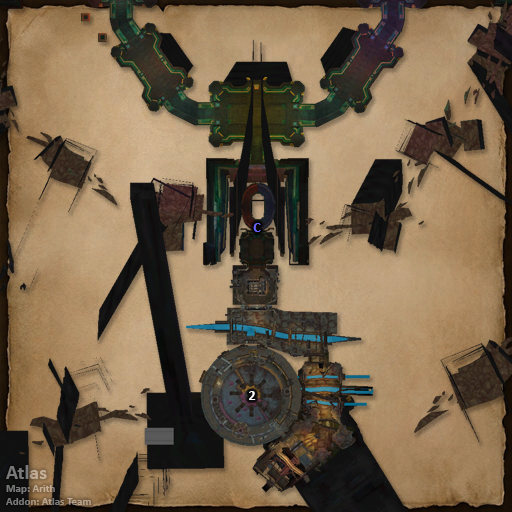
<style>
.page{position:relative;width:512px;height:512px}
.page>*{position:absolute;margin:0}
.t1{font:14px "Calibri-Bold";color:#6666ff}
.t2{font:14px "Calibri-Bold";color:#ffffff}
.t3{font:11px "Calibri-Bold"}
.t4{font:20px "Calibri-Bold"}
</style>
<div class="page">
<p class="t1" style="left:253px;top:223px;width:8px;height:9px">C</p>
<p class="t2" style="left:249px;top:391px;width:7px;height:9px">2</p>
<p class="t3" style="left:6px;top:465px;width:85px;height:40px"><span class="t4">Atlas<br></span>Map: Arith<br>Addon: Atlas Team</p>
</div>
